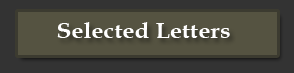
<style>
.page{position:relative;width:294px;height:73px;background:#555341}
.page>*{position:absolute;margin:0}
.t1{font:22px "BookAntiqua-Bold";color:#ffffff;scale:1.1 1}
</style>
<div class="page">
<p class="t1" style="left:57px;top:22px;width:173px;height:16px">Selected Letters</p>
</div>
